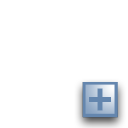
<style>
.page{position:relative;width:128px;height:128px;background:#ffffff}
.page>*{position:absolute;margin:0}
.t1{font:50px "TrebuchetMS-Bold";color:#6486ae}
</style>
<div class="page">
<p class="t1" style="left:89px;top:88px;width:22px;height:23px">+</p>
</div>
